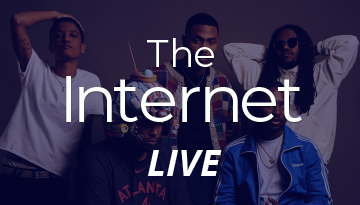
<style>
.page{position:relative;width:360px;height:205px}
.page>*{position:absolute;margin:0}
.t1{font:66px/55px "Montserrat-Regular";color:#fefffe}
.t2{font:38px/55px "Montserrat-Regular";color:#fefffe}
.t3{font:37px "OpenSans-BoldItalic";color:#ffffff}
</style>
<div class="page">
<p class="t1" style="left:66px;top:38px;width:236px;height:84px;text-align:center"><span class="t2">The<br></span>Internet</p>
<p class="t3" style="left:148px;top:150px;width:74px;height:26px">LIVE</p>
</div>
